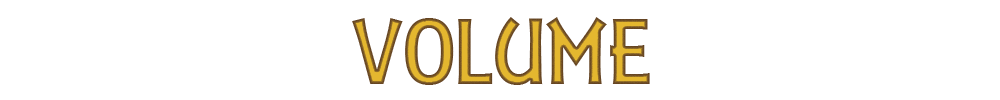
<style>
.page{position:relative;width:1000px;height:100px;background:#ffffff}
.page>*{position:absolute;margin:0}
.t1{font:100px "ARESSENCE"}
</style>
<div class="page">
<p class="t1" style="left:352px;top:17px;width:298px;height:68px">VOLUME</p>
</div>
